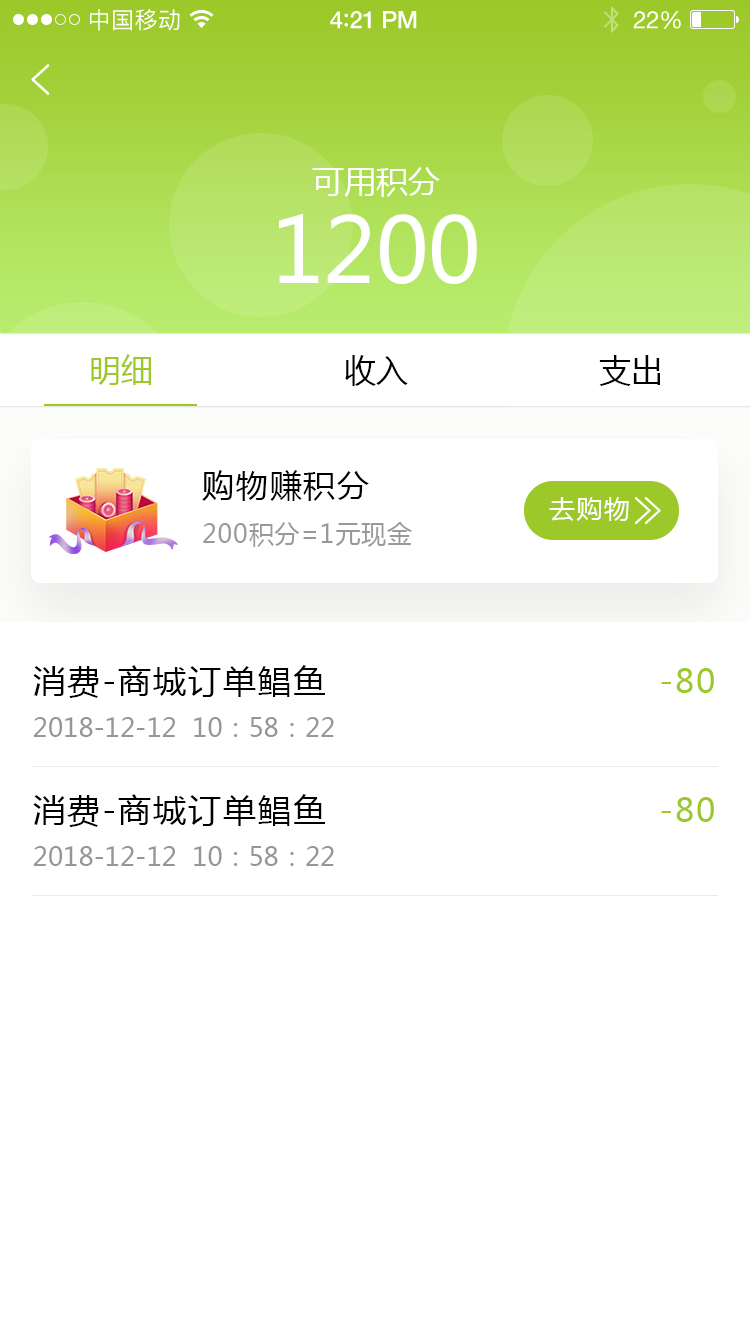
<style>
.page{position:relative;width:750px;height:1334px;background:#ffffff}
.page>*{position:absolute;margin:0}
.t1{font:23px "PingFangSC-Regular";letter-spacing:0.02em;color:#ffffff}
.t2{font:24px "HelveticaNeue-Medium";letter-spacing:-0.02em;color:#ffffff}
.t3{font:26px "Avenir-Medium";letter-spacing:-0.02em;color:#ffffff}
.t4{font:24px "HelveticaNeue";letter-spacing:-0.02em;color:#ffffff}
.t5{font:32px "MicrosoftYaHei";color:#ffffff;text-transform:uppercase}
.t6{font:89.5px "MicrosoftYaHei";color:#ffffff;text-transform:uppercase}
.t7{font:32.1px "MicrosoftYaHei";color:#9cc829;text-transform:uppercase}
.t8{font:32.1px "MicrosoftYaHei";color:#000000;text-transform:uppercase}
.t9{font:32.5px "MicrosoftYaHei";letter-spacing:0.044em;color:#000000;text-transform:uppercase}
.t10{font:26.2px "MicrosoftYaHei";letter-spacing:0.044em;color:#ffffff;text-transform:uppercase}
.t11{font:26.4px "MicrosoftYaHei";letter-spacing:0.044em;color:#989898;text-transform:uppercase;scale:0.93 1}
.t12{font:32.9px "MicrosoftYaHei";letter-spacing:0.059em;color:#000000;text-transform:uppercase}
.t13{font:32.9px "MicrosoftYaHei";letter-spacing:0.059em;color:#9cc829;text-transform:uppercase}
.t14{font:25.9px "MicrosoftYaHei";color:#969696;text-transform:uppercase}
</style>
<div class="page">
<p class="t1" style="left:90px;top:9px;width:90px;height:22px">中国移动</p>
<p class="t2" style="left:330px;top:11px;width:87px;height:18px">4<span class="t3">:</span>21 PM</p>
<p class="t4" style="left:633px;top:11px;width:48px;height:18px">22%</p>
<p class="t5" style="left:312px;top:167px;width:128px;height:30px">可用积分</p>
<p class="t6" style="left:279px;top:213px;width:198px;height:71px">1200</p>
<p class="t7" style="left:91px;top:354px;width:60px;height:31px">明细</p>
<p class="t8" style="left:345px;top:355px;width:63px;height:31px">收入</p>
<p class="t8" style="left:599px;top:355px;width:61px;height:31px">支出</p>
<p class="t9" style="left:202px;top:470px;width:167px;height:31px">购物赚积分</p>
<p class="t10" style="left:549px;top:497px;width:80px;height:24px">去购物</p>
<p class="t11" style="left:203px;top:522px;width:209px;height:25px">200积分=1元现金</p>
<p class="t12" style="left:33px;top:665px;width:292px;height:33px">消费-商城订单鲳鱼</p>
<p class="t13" style="left:661px;top:668px;width:53px;height:25px">-80</p>
<p class="t14" style="left:33px;top:717px;width:301px;height:20px">2018-12-12  10：58：22</p>
<p class="t12" style="left:33px;top:794px;width:292px;height:33px">消费-商城订单鲳鱼</p>
<p class="t13" style="left:661px;top:797px;width:53px;height:25px">-80</p>
<p class="t14" style="left:33px;top:846px;width:301px;height:20px">2018-12-12  10：58：22</p>
</div>
